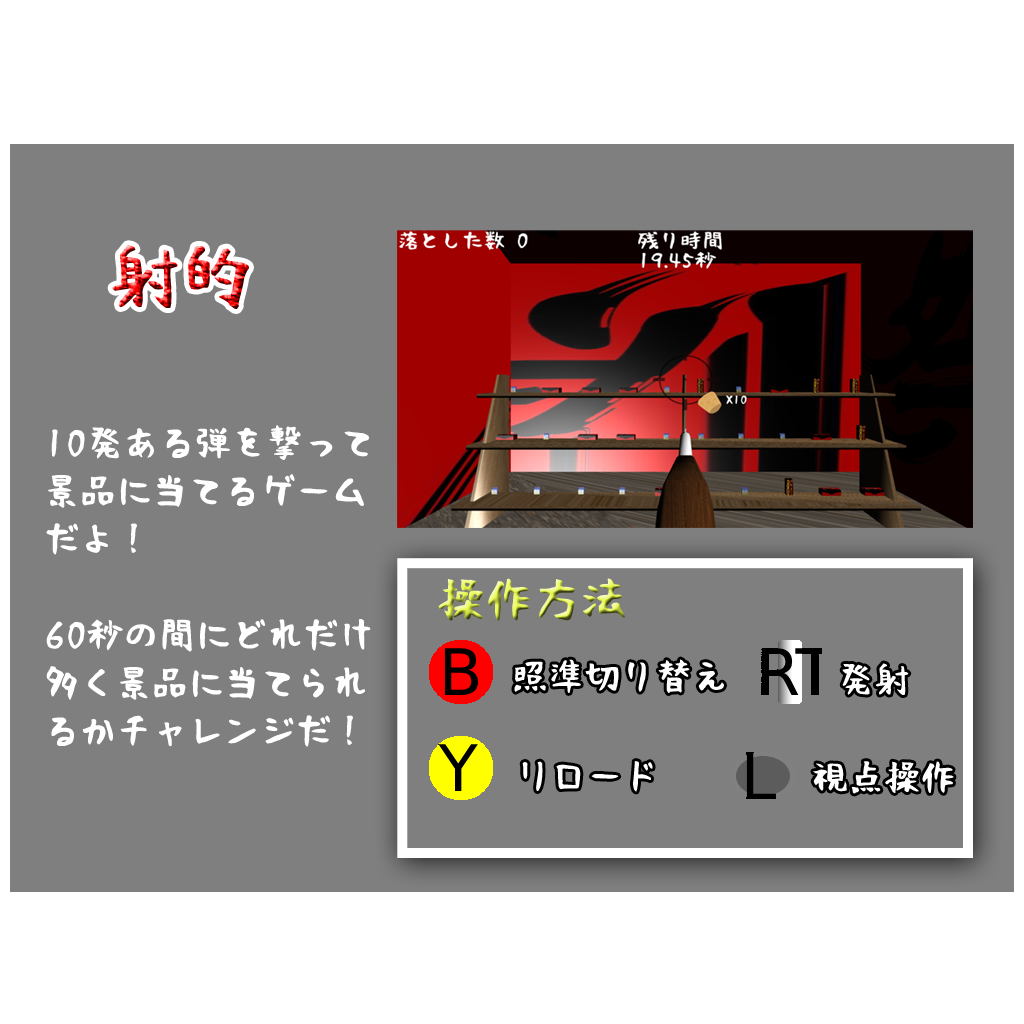
<style>
.page{position:relative;width:1024px;height:1024px;background:#7f7f7f}
.page>*{position:absolute;margin:0}
.t1{font:72px "RiiTegakiFude"}
.t2{font:36px/48px "RiiTegakiFude";color:#ffffff}
.t3{font:48px "RiiTegakiFude"}
.t4{font:36px "RiiTegakiFude";color:#ffffff}
</style>
<div class="page">
<p class="t1" style="left:112px;top:245px;width:137px;height:64px">射的</p>
<p class="t2" style="left:46px;top:425px;width:325px;height:322px">10発ある弾を撃って景品に当てるゲームだよ！<br><br>60秒の間にどれだけ多く景品に当てられるかチャレンジだ！</p>
<p class="t3" style="left:438px;top:578px;width:187px;height:43px">操作方法</p>
<p class="t4" style="left:514px;top:659px;width:210px;height:34px">照準切り替え</p>
<p class="t4" style="left:842px;top:663px;width:67px;height:32px">発射</p>
<p class="t4" style="left:522px;top:761px;width:131px;height:31px">リロード</p>
<p class="t4" style="left:813px;top:761px;width:141px;height:33px">視点操作</p>
</div>
